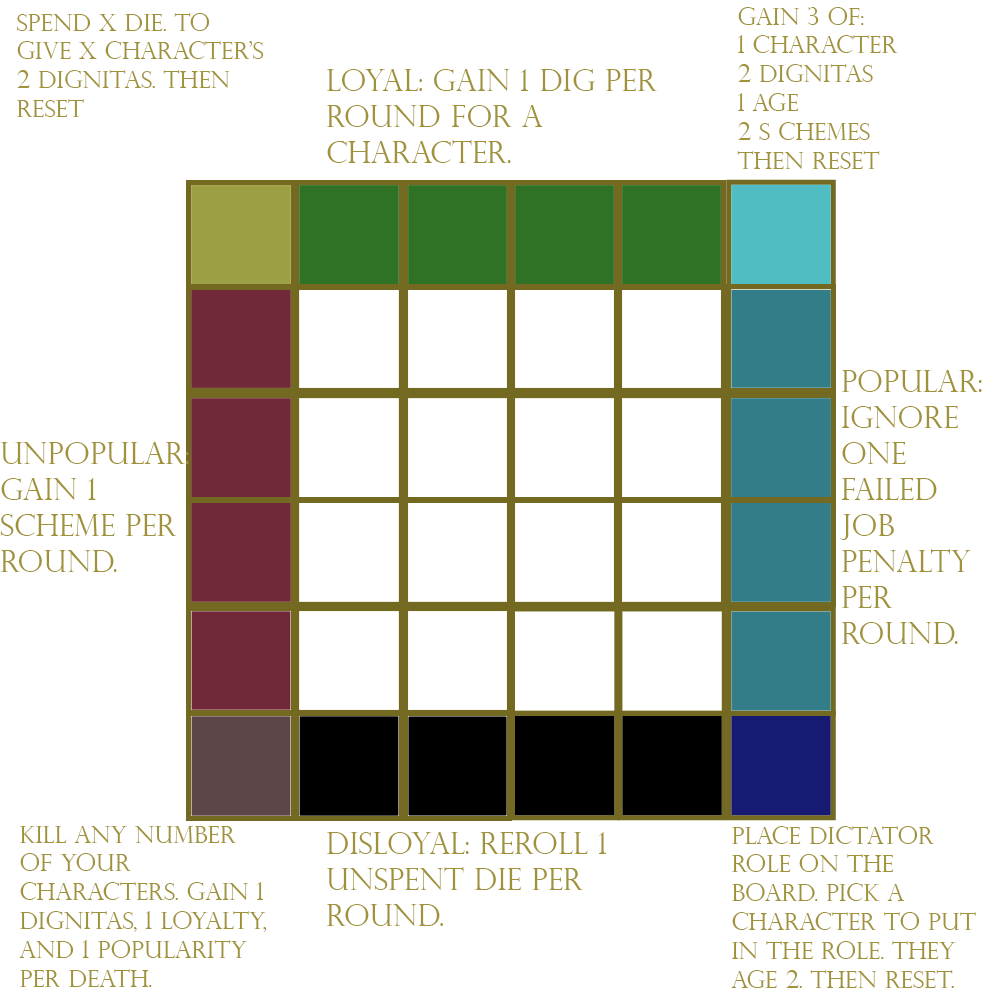
<style>
.page{position:relative;width:1000px;height:1000px;background:#ffffff}
.page>*{position:absolute;margin:0}
.t1{font:24px "PerpetuaTitlingMT-Light";color:#9f9238}
.t2{font:30px "PerpetuaTitlingMT-Light";color:#9f9238}
</style>
<div class="page">
<p class="t1" style="left:17px;top:13px;width:247px;height:104px">Spend x die. to give x character’s 2 dignitas. then reset</p>
<p class="t1" style="left:737px;top:7px;width:161px;height:162px">Gain 3 of: <br>1 character<br>2 dignitas<br>1 age<br>2 s chemes<br>Then reset</p>
<p class="t2" style="left:327px;top:69px;width:330px;height:94px">loyal: Gain 1 Dig per round for a character.</p>
<p class="t2" style="left:840px;top:370px;width:142px;height:274px">popular: ignore one failed job penalty per round.</p>
<p class="t2" style="left:0px;top:442px;width:189px;height:130px">unpopular: Gain 1 scheme per round.</p>
<p class="t1" style="left:19px;top:826px;width:248px;height:161px">kill any number of your characters. gain 1 dignitas, 1 loyalty, and 1 popularity per death.</p>
<p class="t2" style="left:327px;top:832px;width:279px;height:94px">disloyal: Reroll 1 unspent die per round.</p>
<p class="t1" style="left:731px;top:826px;width:245px;height:162px">place dictator role on the board. pick a character to put in the role. they age 2. then reset.</p>
</div>
